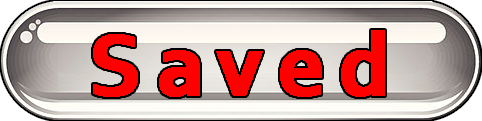
<style>
.page{position:relative;width:482px;height:121px}
.page>*{position:absolute;margin:0}
.t1{font:91.7px "Corbel-Bold";letter-spacing:0.13em;color:#ff0000;font-weight:bold}
</style>
<div class="page">
<p class="t1" style="left:93px;top:30px;width:292px;height:67px">Saved</p>
</div>
